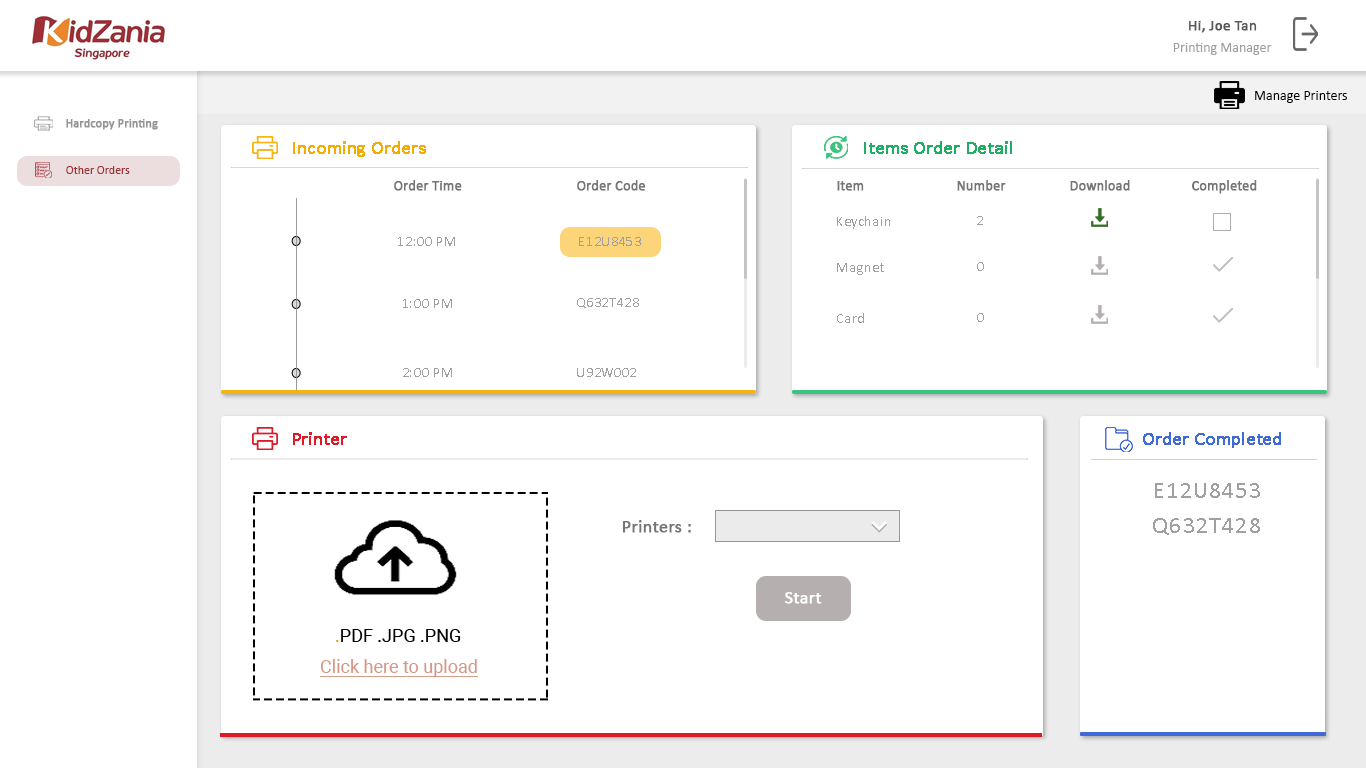
<style>
.page{position:relative;width:1366px;height:768px;background:#ffffff}
.page>*{position:absolute;margin:0}
.t1{font:15px "Calibri";color:#585858;font-weight:bold}
.t2{font:14px "Calibri";color:#9f9f9f}
.t3{font:14px "Calibri";color:#000000}
.t4{font:12px "Calibri";color:#959595;font-weight:bold}
.t5{font:18px "Calibri";color:#f4ac00;font-weight:bold}
.t6{font:18px "Calibri";color:#1bb063;font-weight:bold}
.t7{font:12px "Calibri";color:#9f3037}
.t8{font:14px "Calibri";color:#757575;font-weight:bold}
.t9{font:14px "Calibri";letter-spacing:0.05em;color:#a0a0a0}
.t10{font:18px "Calibri";color:#e01926;font-weight:bold}
.t11{font:18px "Calibri";color:#3f6ad8;font-weight:bold}
.t12{font:24px "Calibri";letter-spacing:0.05em;color:#a0a0a0}
.t13{font:18px "Calibri";color:#757575;font-weight:bold}
.t14{font:18px "Calibri";color:#ffffff;font-weight:bold}
.t15{font:18px "Roboto-Regular";color:#010101}
.t16{font:18px "Roboto-Regular";color:#f28b00}
.t17{font:18px "Roboto-Regular";color:#d59685;text-decoration:underline}
</style>
<div class="page">
<p class="t1" style="left:1189px;top:21px;width:68px;height:12px">Hi, Joe Tan</p>
<p class="t2" style="left:1173px;top:43px;width:99px;height:12px">Printing Manager</p>
<p class="t3" style="left:1255px;top:91px;width:92px;height:12px">Manage Printers</p>
<p class="t4" style="left:66px;top:119px;width:92px;height:11px">Hardcopy Printing</p>
<p class="t5" style="left:293px;top:141px;width:133px;height:16px">Incoming Orders</p>
<p class="t6" style="left:864px;top:141px;width:148px;height:13px">Items Order Detail</p>
<p class="t7" style="left:66px;top:166px;width:64px;height:8px">Other Orders</p>
<p class="t8" style="left:394px;top:180px;width:68px;height:11px">Order Time</p>
<p class="t8" style="left:577px;top:180px;width:68px;height:11px">Order Code</p>
<p class="t8" style="left:837px;top:181px;width:27px;height:10px">Item</p>
<p class="t8" style="left:957px;top:180px;width:49px;height:11px">Number</p>
<p class="t8" style="left:1070px;top:180px;width:60px;height:11px">Download</p>
<p class="t8" style="left:1192px;top:180px;width:65px;height:14px">Completed</p>
<p class="t9" style="left:837px;top:216px;width:53px;height:13px">Keychain</p>
<p class="t9" style="left:977px;top:216px;width:6px;height:9px">2</p>
<p class="t9" style="left:398px;top:237px;width:57px;height:9px">12:00 PM</p>
<p class="t9" style="left:579px;top:237px;width:62px;height:9px">E12U8453</p>
<p class="t9" style="left:837px;top:263px;width:47px;height:12px">Magnet</p>
<p class="t9" style="left:977px;top:262px;width:7px;height:9px">0</p>
<p class="t9" style="left:403px;top:299px;width:49px;height:9px">1:00 PM</p>
<p class="t9" style="left:577px;top:298px;width:62px;height:10px">Q632T428</p>
<p class="t9" style="left:837px;top:313px;width:27px;height:10px">Card</p>
<p class="t9" style="left:977px;top:313px;width:7px;height:9px">0</p>
<p class="t9" style="left:403px;top:368px;width:49px;height:9px">2:00 PM</p>
<p class="t9" style="left:577px;top:368px;width:59px;height:9px">U92W002</p>
<p class="t10" style="left:293px;top:432px;width:54px;height:13px">Printer</p>
<p class="t11" style="left:1143px;top:432px;width:138px;height:16px">Order Completed</p>
<p class="t12" style="left:1155px;top:483px;width:105px;height:15px">E12U8453</p>
<p class="t13" style="left:622px;top:520px;width:69px;height:13px">Printers :</p>
<p class="t12" style="left:1153px;top:518px;width:107px;height:17px">Q632T428</p>
<p class="t14" style="left:785px;top:592px;width:37px;height:12px">Start</p>
<p class="t15" style="left:336px;top:629px;width:125px;height:13px"><span class="t16">.</span>PDF .JPG .PNG</p>
<p class="t17" style="left:320px;top:659px;width:158px;height:18px">Click here to upload</p>
</div>
